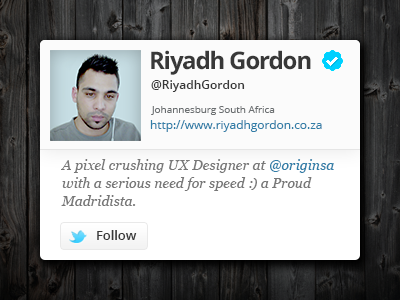
<style>
.page{position:relative;width:400px;height:300px;background:#ffffff}
.page>*{position:absolute;margin:0}
.t1{font:24px "OpenSans-Bold";letter-spacing:-0.05em;color:#383838}
.t2{font:12px "OpenSans-Semibold";color:#383838}
.t3{font:10px "OpenSans";letter-spacing:-0.005em;color:#6a6e70}
.t4{font:12px "OpenSans";letter-spacing:-0.005em;color:#317ea8}
.t5{font:14px/18px "Georgia-Italic";letter-spacing:0.005em;color:#777777}
.t6{font:14px/18px "Georgia-Italic";letter-spacing:0.005em;color:#317ea8}
.t7{font:13px "OpenSans-Semibold";letter-spacing:-0.005em;color:#383838}
</style>
<div class="page">
<p class="t1" style="left:151px;top:50px;width:160px;height:25px">Riyadh Gordon</p>
<p class="t2" style="left:151px;top:80px;width:94px;height:12px">@RiyadhGordon</p>
<p class="t3" style="left:151px;top:106px;width:124px;height:9px">Johannesburg South Africa</p>
<p class="t4" style="left:150px;top:120px;width:172px;height:12px">http://www.riyadhgordon.co.za</p>
<p class="t5" style="left:61px;top:159px;width:273px;height:47px">A pixel crushing UX Designer at <span class="t6">@originsa</span> with a serious need for speed :) a Proud Madridista.</p>
<p class="t7" style="left:97px;top:230px;width:40px;height:10px">Follow</p>
</div>
